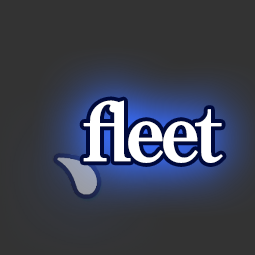
<style>
.page{position:relative;width:255px;height:255px;background:#333333}
.page>*{position:absolute;margin:0}
.t1{font:80px "RyuminPro-ExBold";letter-spacing:-0.08em;color:#ffffff;font-weight:bold}
</style>
<div class="page">
<p class="t1" style="left:83px;top:100px;width:140px;height:63px">fleet</p>
</div>
